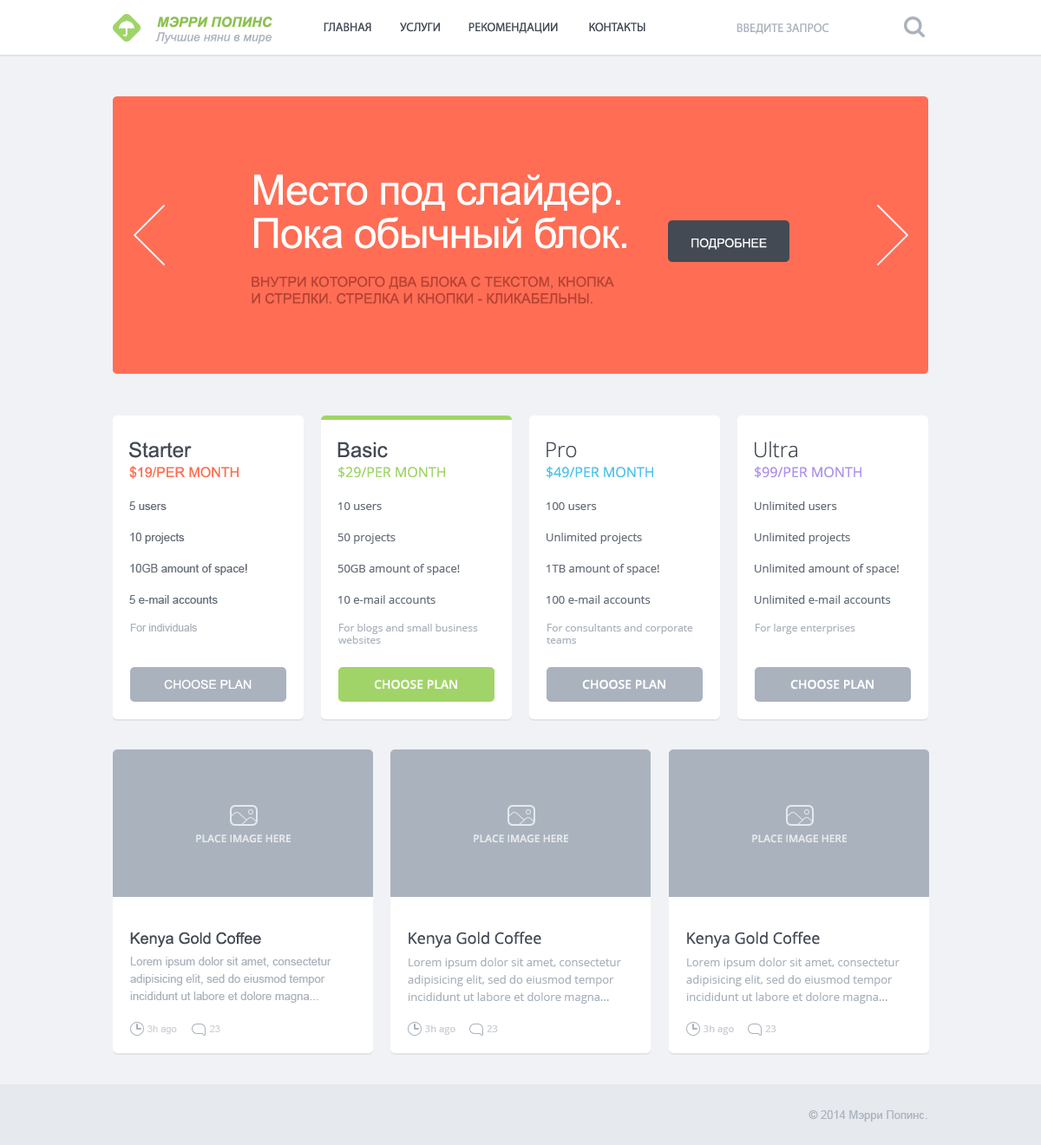
<style>
.page{position:relative;width:1041px;height:1145px;background:#f0f2f5}
.page>*{position:absolute;margin:0}
.t1{font:13.9px "Arial-BoldItalicMT";color:#8cc152;text-transform:uppercase}
.t2{font:12.1px "MyriadPro-Regular";color:#434a54;text-transform:uppercase}
.t3{font:12.1px "MyriadPro-Regular";color:#aab2bd;text-transform:uppercase}
.t4{font:12.1px "Arial-ItalicMT";color:#aab2bd}
.t5{font:41.6px/43.4px "ArialMT";letter-spacing:-0.02em;color:#ffffff}
.t6{font:12.1px "ArialMT";color:#ffffff;text-transform:uppercase}
.t7{font:13.9px "ArialMT";color:#b54231;text-transform:uppercase}
.t8{font:20.8px "ArialMT";color:#434a54}
.t9{font:20.8px "OpenSans-Light";color:#434a54}
.t10{font:13.9px "ArialMT";color:#fc6e51;text-transform:uppercase}
.t11{font:13.9px "OpenSans";color:#a1d36e;text-transform:uppercase}
.t12{font:13.9px "OpenSans";color:#55c1e7;text-transform:uppercase}
.t13{font:13.9px "OpenSans";color:#ac94e9;text-transform:uppercase}
.t14{font:11.3px/31.2px "ArialMT";color:#656d78}
.t15{font:11.3px/31.2px "OpenSans";color:#656d78}
.t16{font:10.4px "ArialMT";color:#aab2bd}
.t17{font:10.4px "OpenSans";color:#aab2bd}
.t18{font:12.1px "OpenSans-Semibold";color:#ffffff;text-transform:uppercase}
.t19{font:15.6px "ArialMT";color:#434a54}
.t20{font:15.6px "OpenSans";color:#434a54}
.t21{font:11.3px/17.4px "ArialMT";color:#aab2bd}
.t22{font:11.3px/17.4px "OpenSans";color:#aab2bd}
.t23{font:9.5px "ArialMT";color:#ccd1d7}
.t24{font:9.5px "OpenSans-Semibold";color:#ccd1d8}
.t25{font:11.3px "ArialMT";color:#aab2bd}
</style>
<div class="page">
<p class="t1" style="left:157px;top:16px;width:115px;height:12px">Мэрри попинс</p>
<p class="t2" style="left:324px;top:23px;width:47px;height:9px">главная</p>
<p class="t2" style="left:400px;top:23px;width:40px;height:9px">услуги</p>
<p class="t2" style="left:469px;top:23px;width:89px;height:11px">рекомендации</p>
<p class="t2" style="left:589px;top:23px;width:57px;height:9px">контакты</p>
<p class="t3" style="left:737px;top:23px;width:92px;height:12px">введите запрос</p>
<p class="t4" style="left:155px;top:32px;width:117px;height:12px">Лучшие няни в мире</p>
<p class="t5" style="left:254px;top:174px;width:372px;height:75px">Место под слайдер.<br>Пока обычный блок.</p>
<p class="t6" style="left:692px;top:238px;width:75px;height:12px">подробнее</p>
<p class="t7" style="left:252px;top:276px;width:362px;height:28px">внутри которого два блока с текстом, кнопка<br>и стрелки. стрелка и кнопки - кликабельны.</p>
<p class="t8" style="left:129px;top:442px;width:63px;height:16px">Starter</p>
<p class="t8" style="left:338px;top:442px;width:50px;height:16px">Basic</p>
<p class="t9" style="left:547px;top:442px;width:30px;height:16px">Pro</p>
<p class="t9" style="left:755px;top:441px;width:42px;height:17px">Ultra</p>
<p class="t10" style="left:129px;top:466px;width:110px;height:13px">$19/per month</p>
<p class="t11" style="left:338px;top:466px;width:107px;height:12px">$29/per month</p>
<p class="t12" style="left:547px;top:466px;width:106px;height:12px">$49/per month</p>
<p class="t13" style="left:755px;top:466px;width:107px;height:12px">$99/per month</p>
<p class="t14" style="left:129px;top:501px;width:118px;height:103px">5 users<br>10 projects<br>10GB amount of space!<br>5 e-mail accounts</p>
<p class="t15" style="left:338px;top:502px;width:122px;height:102px">10 users<br>50 projects<br>50GB amount of space!<br>10 e-mail accounts</p>
<p class="t15" style="left:547px;top:502px;width:112px;height:102px">100 users<br>Unlimited projects<br>1TB amount of space!<br>100 e-mail accounts</p>
<p class="t15" style="left:755px;top:501px;width:144px;height:103px">Unlimited users<br>Unlimited projects<br>Unlimited amount of space!<br>Unlimited e-mail accounts</p>
<p class="t16" style="left:130px;top:624px;width:67px;height:8px">For individuals</p>
<p class="t17" style="left:338px;top:624px;width:140px;height:20px">For blogs and small business <br>websites</p>
<p class="t17" style="left:547px;top:624px;width:146px;height:20px">For consultants and corporate<br>teams</p>
<p class="t17" style="left:756px;top:624px;width:99px;height:10px">For large enterprises</p>
<p class="t6" style="left:164px;top:679px;width:88px;height:11px">Choose plan</p>
<p class="t18" style="left:374px;top:679px;width:83px;height:11px">Choose plan</p>
<p class="t18" style="left:582px;top:679px;width:83px;height:11px">Choose plan</p>
<p class="t18" style="left:790px;top:679px;width:84px;height:11px">Choose plan</p>
<p class="t19" style="left:130px;top:932px;width:131px;height:15px">Kenya Gold Coffee</p>
<p class="t20" style="left:409px;top:932px;width:132px;height:16px">Kenya Gold Coffee</p>
<p class="t20" style="left:687px;top:932px;width:133px;height:16px">Kenya Gold Coffee</p>
<p class="t21" style="left:130px;top:957px;width:201px;height:46px">Lorem ipsum dolor sit amet, consectetur adipisicing elit, sed do eiusmod tempor incididunt ut labore et dolore magna...</p>
<p class="t22" style="left:408px;top:958px;width:213px;height:46px">Lorem ipsum dolor sit amet, consectetur adipisicing elit, sed do eiusmod tempor incididunt ut labore et dolore magna...</p>
<p class="t22" style="left:686px;top:958px;width:214px;height:46px">Lorem ipsum dolor sit amet, consectetur adipisicing elit, sed do eiusmod tempor incididunt ut labore et dolore magna...</p>
<p class="t23" style="left:147px;top:1026px;width:30px;height:8px">3h ago</p>
<p class="t23" style="left:210px;top:1026px;width:10px;height:6px">23</p>
<p class="t24" style="left:425px;top:1026px;width:31px;height:9px">3h ago</p>
<p class="t24" style="left:487px;top:1026px;width:11px;height:6px">23</p>
<p class="t24" style="left:704px;top:1026px;width:30px;height:9px">3h ago</p>
<p class="t24" style="left:765px;top:1026px;width:12px;height:6px">23</p>
<p class="t25" style="left:809px;top:1111px;width:119px;height:11px">© 2014 Мэрри Попинс.</p>
</div>
